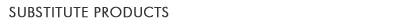
<style>
.page{position:relative;width:400px;height:24px;background:#ffffff}
.page>*{position:absolute;margin:0}
.t1{font:14px "FuturaBT-Light";letter-spacing:0.025em;color:#363636;text-transform:uppercase;font-weight:bold}
</style>
<div class="page">
<p class="t1" style="left:9px;top:6px;width:160px;height:12px">substitute products</p>
</div>
